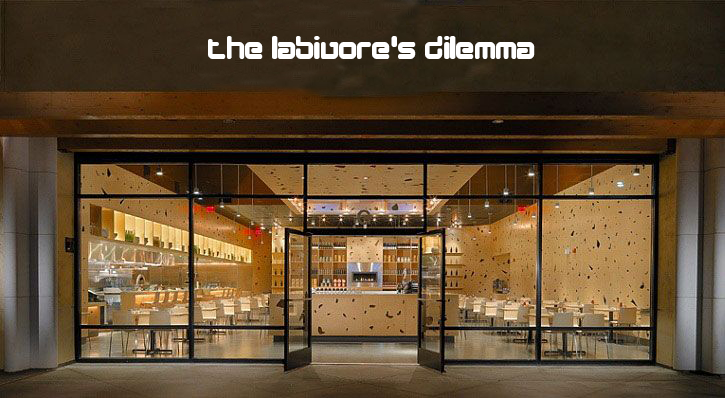
<style>
.page{position:relative;width:725px;height:398px}
.page>*{position:absolute;margin:0}
.t1{font:33.3px "DesignerBlock";color:#ffffff}
</style>
<div class="page">
<p class="t1" style="left:208px;top:36px;width:327px;height:23px">the labivore’s dilemma</p>
</div>
